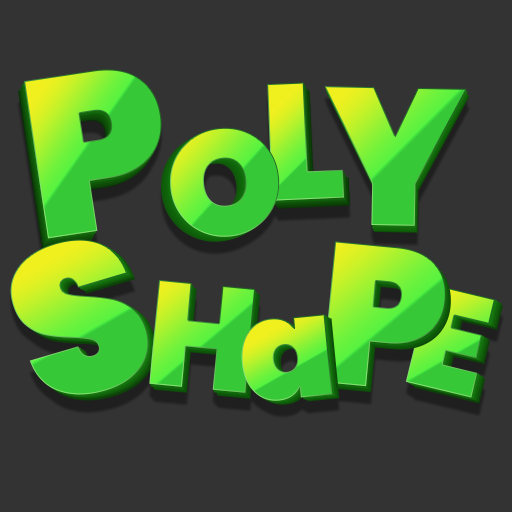
<style>
.page{position:relative;width:512px;height:512px;background:#333333}
.page>*{position:absolute;margin:0}
.t1{font:224.5px "Poppins-Black"}
.t2{font:164.7px "Poppins-Black"}
.t3{font:194.6px "Poppins-Black"}
.t4{font:149.7px "Poppins-Black"}
.t5{font:213.4px "Poppins-Black"}
.t6{font:199.3px "Poppins-Black"}
.t7{font:147.1px "Poppins-Black"}
.t8{font:142.4px "Poppins-Black"}
</style>
<div class="page">
<p class="t1" style="left:24px;top:69px;width:138px;height:170px;rotate:-9deg">P</p>
<p class="t2" style="left:267px;top:82px;width:77px;height:119px;rotate:-3deg">L</p>
<p class="t3" style="left:324px;top:86px;width:143px;height:140px;rotate:1deg">Y</p>
<p class="t4" style="left:170px;top:127px;width:110px;height:110px;rotate:-5deg">O</p>
<p class="t5" style="left:10px;top:239px;width:139px;height:156px;rotate:-16deg">S</p>
<p class="t6" style="left:321px;top:241px;width:125px;height:146px;rotate:5deg">P</p>
<p class="t7" style="left:149px;top:279px;width:107px;height:114px;rotate:5deg">H</p>
<p class="t8" style="left:405px;top:283px;width:90px;height:115px;rotate:14deg">E</p>
<p class="t8" style="left:241px;top:314px;width:92px;height:87px;rotate:-6deg">a</p>
</div>
